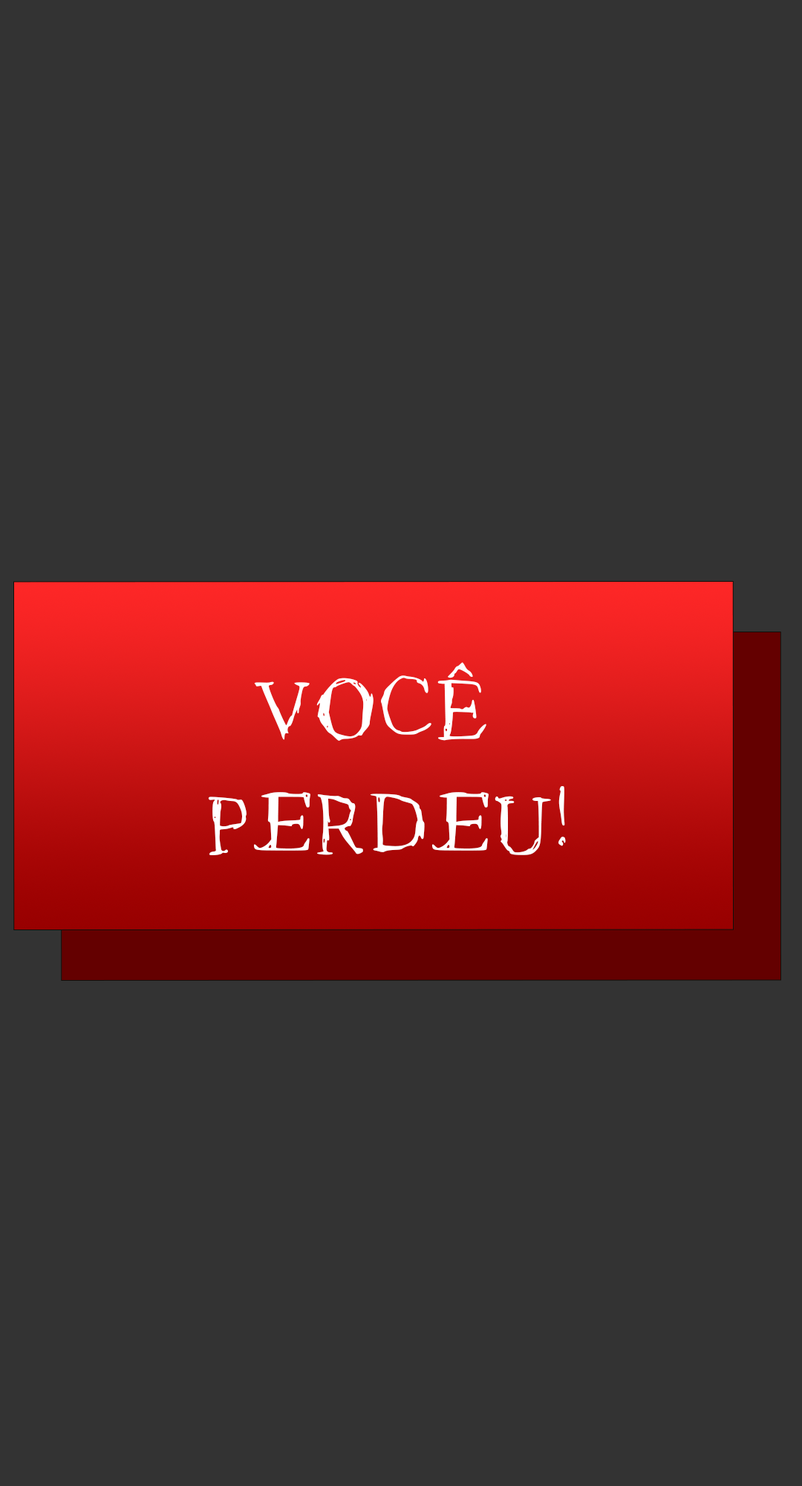
<style>
.page{position:relative;width:802px;height:1486px;background:#333333}
.page>*{position:absolute;margin:0}
.t1{font:128.4px/116.1px "Roman-New-Times";color:#ffffff;text-transform:uppercase;scale:0.95 1}
</style>
<div class="page">
<p class="t1" style="left:208px;top:662px;width:358px;height:193px;text-align:center">VocÊ<br> perdeu!</p>
</div>
